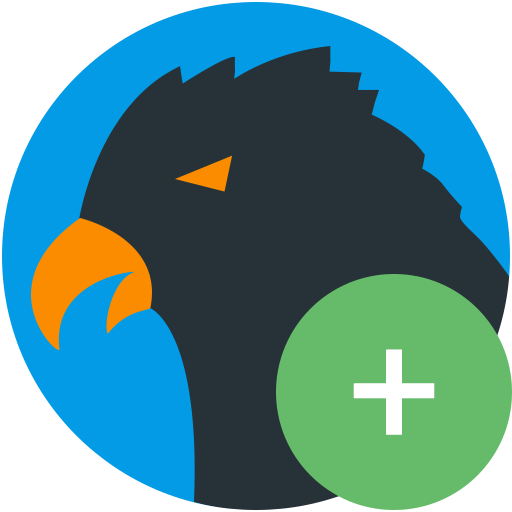
<style>
.page{position:relative;width:512px;height:512px;background:#263238}
.page>*{position:absolute;margin:0}
.t1{font:162.5px "Roboto-Regular";letter-spacing:-0.06em;color:#ffffff;font-weight:bold}
</style>
<div class="page">
<p class="t1" style="left:353px;top:349px;width:82px;height:86px">+</p>
</div>
